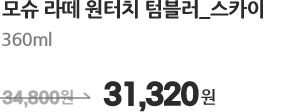
<style>
.page{position:relative;width:283px;height:112px;background:#ffffff}
.page>*{position:absolute;margin:0}
.t1{font:20px "NanumGothicExtraBold";letter-spacing:-0.03em;color:#2b2b2b}
.t2{font:18px "NanumGothicBold";letter-spacing:-0.03em;color:#7d7d7d}
.t3{font:16px "DXBangtangoStd-Regular";letter-spacing:-0.03em;color:#adadad}
.t4{font:16px "NanumGothicExtraBold";letter-spacing:-0.03em;color:#adadad}
.t5{font:28px "DXBangtangoStd-Regular";letter-spacing:-0.05em;color:#2b2b2b}
.t6{font:17px "NanumGothicBold";letter-spacing:-0.05em;color:#2b2b2b}
</style>
<div class="page">
<p class="t1" style="left:2px;top:0px;width:261px;height:19px">모슈 라떼 원터치 텀블러_스카이</p>
<p class="t2" style="left:2px;top:31px;width:50px;height:15px">360ml</p>
<p class="t3" style="left:2px;top:89px;width:71px;height:19px">34,800<span class="t4">원</span></p>
<p class="t5" style="left:103px;top:81px;width:112px;height:31px">31,320<span class="t6">원</span></p>
</div>
